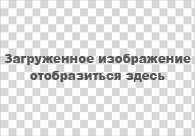
<style>
.page{position:relative;width:195px;height:136px;background:#ffffff}
.page>*{position:absolute;margin:0}
.t1{font:12px "Arial-Black";color:#575757}
.t2{font:12px "Arial-Black";color:#565656}
</style>
<div class="page">
<p class="t1" style="left:4px;top:54px;width:187px;height:11px">Загруженное изображение</p>
<p class="t2" style="left:30px;top:71px;width:135px;height:11px">отобразиться здесь</p>
</div>
